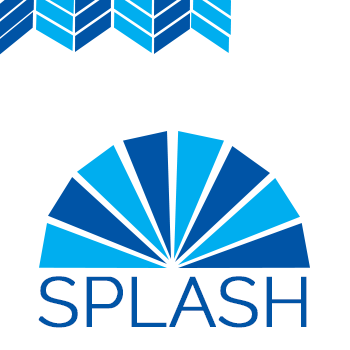
<style>
.page{position:relative;width:350px;height:350px;background:#ffffff}
.page>*{position:absolute;margin:0}
.t1{font:69.6px "Raleway-Light";color:#0054a6;text-transform:uppercase;font-weight:bold}
</style>
<div class="page">
<p class="t1" style="left:38px;top:276px;width:269px;height:52px">splash</p>
</div>
